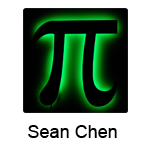
<style>
.page{position:relative;width:150px;height:150px;background:#ffffff}
.page>*{position:absolute;margin:0}
.t1{font:18px "ArialMT";color:#000000}
</style>
<div class="page">
<p class="t1" style="left:28px;top:125px;width:89px;height:13px">Sean Chen</p>
</div>
